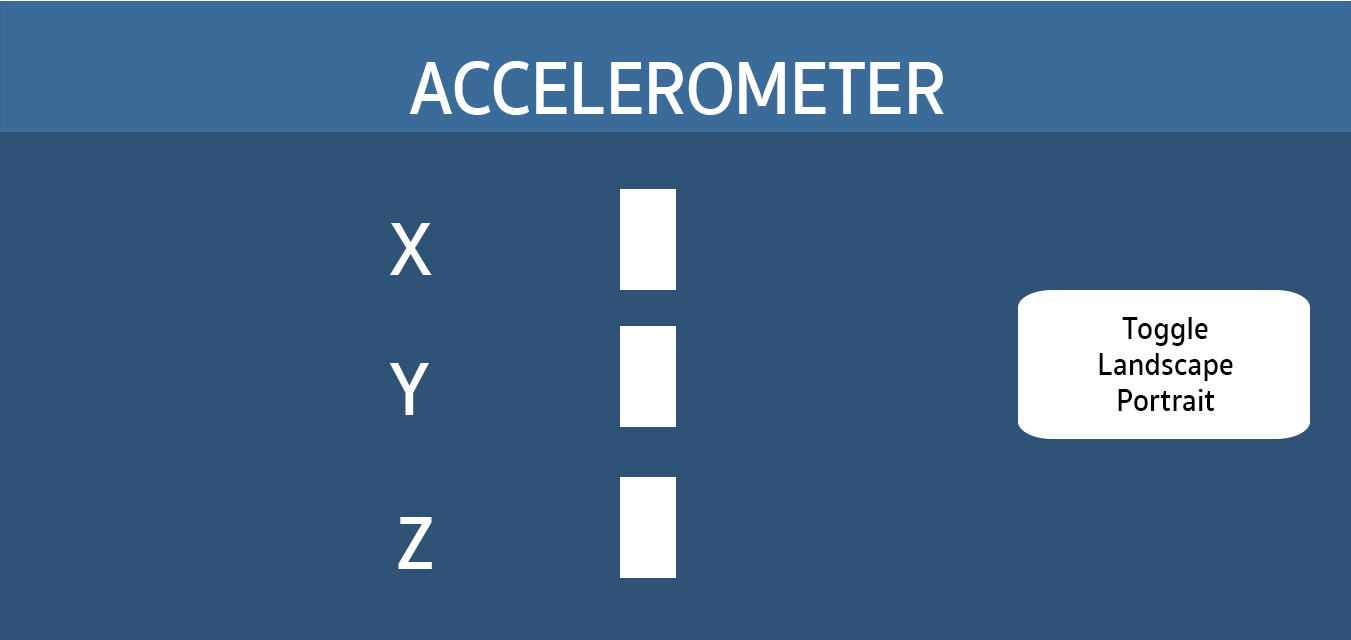
<style>
.page{position:relative;width:1351px;height:640px;background:#2e5376}
.page>*{position:absolute;margin:0}
.t1{font:76.6px "SukhumvitSet-SemiBold";color:#ffffff;scale:0.91 1}
.t2{font:32.2px/36px "SukhumvitSet-SemiBold";color:#010101;scale:0.91 1}
</style>
<div class="page">
<p class="t1" style="left:409px;top:61px;width:535px;height:54px">ACCELEROMETER</p>
<p class="t1" style="left:390px;top:223px;width:42px;height:52px">X</p>
<p class="t2" style="left:1099px;top:317px;width:134px;height:94px;text-align:center">Toggle<br>Landscape<br>Portrait</p>
<p class="t1" style="left:389px;top:363px;width:40px;height:52px">Y</p>
<p class="t1" style="left:398px;top:517px;width:34px;height:52px">Z</p>
</div>
